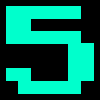
<style>
.page{position:relative;width:100px;height:100px;background:#000000}
.page>*{position:absolute;margin:0}
.t1{font:100px "PressStart2P-Regular";color:#00ffcc}
</style>
<div class="page">
<p class="t1" style="left:6px;top:6px;width:88px;height:88px">5</p>
</div>
